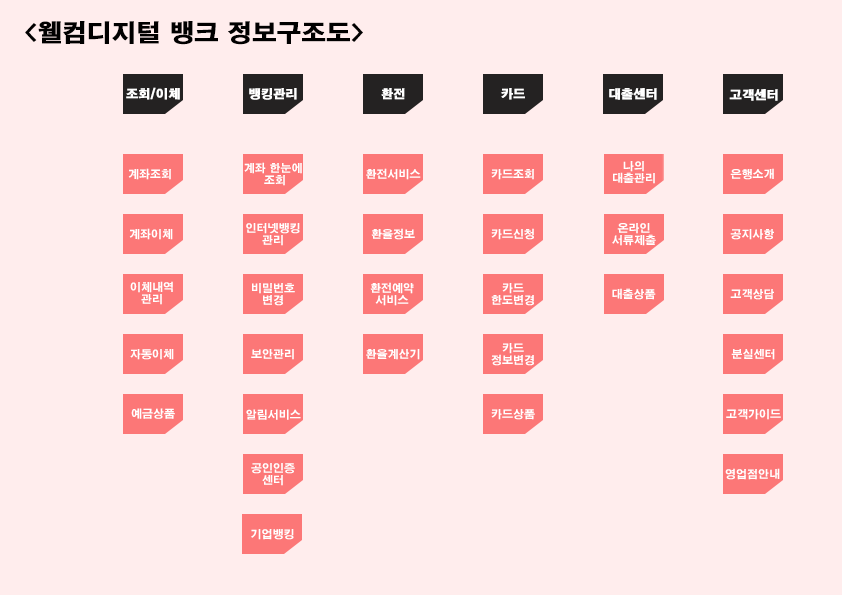
<style>
.page{position:relative;width:842px;height:595px;background:#ffeded}
.page>*{position:absolute;margin:0}
.t1{font:24px "H2gtrE";color:#010000;font-weight:bold}
.t2{font:12px "H2gtrE";color:#ffffff;font-weight:bold}
.t3{font:11px/12px "H2gtrE";color:#ffffff}
.t4{font:11px "H2gtrE";color:#ffffff}
</style>
<div class="page">
<p class="t1" style="left:25px;top:21px;width:338px;height:24px">&lt;웰컴디지털 뱅크 정보구조도&gt;</p>
<p class="t2" style="left:126px;top:87px;width:54px;height:13px">조회/이체</p>
<p class="t2" style="left:249px;top:88px;width:48px;height:12px">뱅킹관리</p>
<p class="t2" style="left:381px;top:88px;width:24px;height:12px">환전</p>
<p class="t2" style="left:501px;top:88px;width:24px;height:12px">카드</p>
<p class="t2" style="left:609px;top:88px;width:48px;height:12px">대출센터</p>
<p class="t2" style="left:729px;top:89px;width:49px;height:12px">고객센터</p>
<p class="t3" style="left:613px;top:161px;width:42px;height:23px;text-align:center">나의<br>대출관리</p>
<p class="t4" style="left:128px;top:168px;width:43px;height:12px">계좌조회</p>
<p class="t3" style="left:244px;top:162px;width:58px;height:24px;text-align:center">계좌 한눈에 <br>조회</p>
<p class="t4" style="left:366px;top:168px;width:55px;height:12px">환전서비스</p>
<p class="t4" style="left:491px;top:169px;width:43px;height:11px">카드조회</p>
<p class="t4" style="left:730px;top:168px;width:44px;height:12px">은행소개</p>
<p class="t4" style="left:129px;top:228px;width:44px;height:12px">계좌이체</p>
<p class="t3" style="left:246px;top:223px;width:54px;height:23px;text-align:center">인터넷뱅킹<br>관리</p>
<p class="t4" style="left:371px;top:228px;width:44px;height:12px">환율정보</p>
<p class="t4" style="left:491px;top:228px;width:43px;height:12px">카드신청</p>
<p class="t3" style="left:612px;top:223px;width:44px;height:23px;text-align:center">온라인<br>서류제출</p>
<p class="t4" style="left:730px;top:229px;width:44px;height:11px">공지사항</p>
<p class="t3" style="left:130px;top:281px;width:43px;height:24px;text-align:center">이체내역<br>관리</p>
<p class="t3" style="left:252px;top:283px;width:43px;height:23px;text-align:center">비밀번호<br>변경</p>
<p class="t3" style="left:370px;top:282px;width:44px;height:24px;text-align:center">환전예약<br>서비스</p>
<p class="t3" style="left:491px;top:283px;width:43px;height:23px;text-align:center">카드<br>한도변경</p>
<p class="t4" style="left:612px;top:288px;width:44px;height:12px">대출상품</p>
<p class="t4" style="left:730px;top:289px;width:44px;height:11px">고객상담</p>
<p class="t4" style="left:130px;top:349px;width:44px;height:11px">자동이체</p>
<p class="t4" style="left:251px;top:349px;width:43px;height:11px">보안관리</p>
<p class="t4" style="left:366px;top:349px;width:54px;height:11px">환율계산기</p>
<p class="t3" style="left:491px;top:343px;width:43px;height:23px;text-align:center">카드<br>정보변경</p>
<p class="t4" style="left:731px;top:349px;width:44px;height:11px">분실센터</p>
<p class="t4" style="left:131px;top:408px;width:44px;height:11px">예금상품</p>
<p class="t4" style="left:246px;top:409px;width:55px;height:11px">알림서비스</p>
<p class="t4" style="left:491px;top:409px;width:44px;height:11px">카드상품</p>
<p class="t4" style="left:726px;top:409px;width:55px;height:11px">고객가이드</p>
<p class="t3" style="left:251px;top:463px;width:44px;height:23px;text-align:center">공인인증<br>센터</p>
<p class="t4" style="left:725px;top:468px;width:55px;height:12px">영업점안내</p>
<p class="t4" style="left:251px;top:529px;width:43px;height:11px">기업뱅킹</p>
</div>
